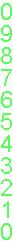
<style>
.page{position:relative;width:13px;height:242px;background:#ffffff}
.page>*{position:absolute;margin:0}
.t1{font:24px "ArialMT";color:#55ff55}
.t2{font:12px "ArialMT";color:#55ff55}
</style>
<div class="page">
<p class="t1" style="left:1px;top:3px;width:11px;height:17px"><span class="t2"> </span>0</p>
<p class="t1" style="left:1px;top:25px;width:11px;height:17px"><span class="t2"> </span>9</p>
<p class="t1" style="left:1px;top:47px;width:11px;height:17px"><span class="t2"> </span>8</p>
<p class="t1" style="left:1px;top:69px;width:11px;height:17px"><span class="t2"> </span>7</p>
<p class="t1" style="left:1px;top:91px;width:11px;height:17px"><span class="t2"> </span>6</p>
<p class="t1" style="left:1px;top:113px;width:11px;height:17px"><span class="t2"> </span>5</p>
<p class="t1" style="left:1px;top:135px;width:11px;height:17px"><span class="t2"> </span>4</p>
<p class="t1" style="left:1px;top:157px;width:11px;height:17px"><span class="t2"> </span>3</p>
<p class="t1" style="left:1px;top:179px;width:11px;height:17px"><span class="t2"> </span>2</p>
<p class="t1" style="left:3px;top:201px;width:6px;height:17px"><span class="t2"> </span>1</p>
<p class="t1" style="left:1px;top:223px;width:11px;height:17px"><span class="t2"> </span>0</p>
</div>
